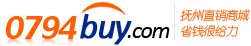
<style>
.page{position:relative;width:251px;height:46px;background:#ffffff}
.page>*{position:absolute;margin:0}
.t1{font:50px "LilyUPC";letter-spacing:-0.05em;color:#ff5f04;font-style:italic;scale:0.9 1}
.t2{font:36px "Calibri-Italic";letter-spacing:-0.05em;color:#012989;font-weight:bold}
.t3{font:12px "YouYuan";letter-spacing:-0.05em;font-style:italic}
.t4{font:24px "Calibri-Italic";letter-spacing:-0.05em;color:#000000}
</style>
<div class="page">
<p class="t1" style="left:5px;top:16px;width:72px;height:23px">0794</p>
<p class="t2" style="left:80px;top:14px;width:52px;height:31px">buy</p>
<p class="t3" style="left:180px;top:9px;width:70px;height:12px">抚州直销商城</p>
<p class="t4" style="left:127px;top:27px;width:43px;height:11px">.com</p>
<p class="t3" style="left:180px;top:25px;width:58px;height:12px">省钱很给力</p>
</div>
